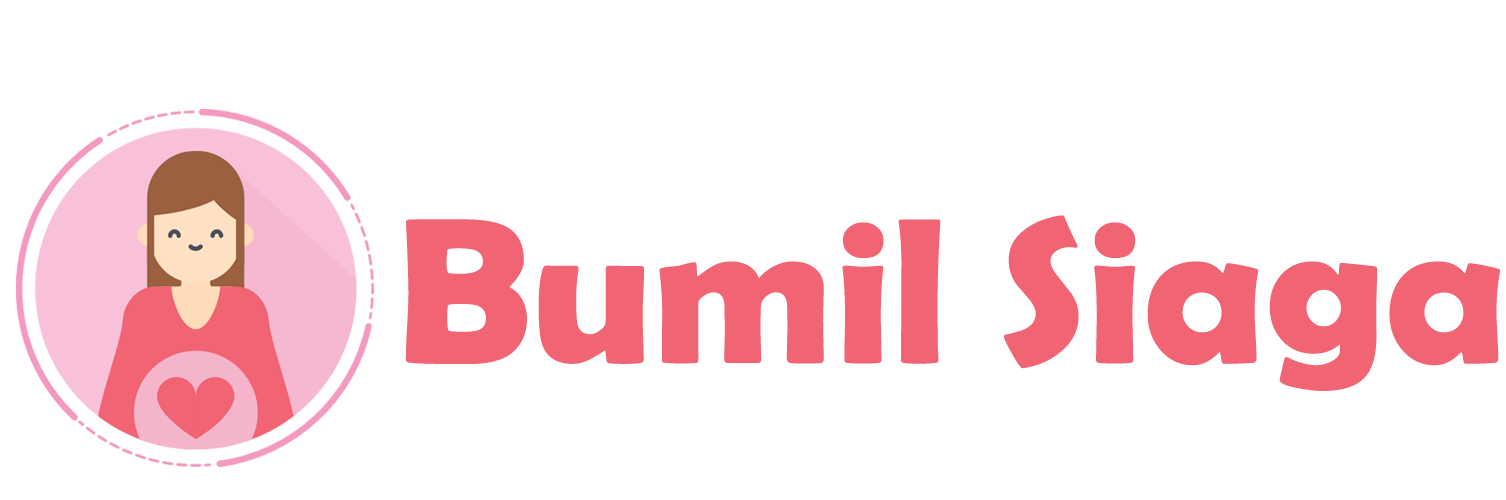
<style>
.page{position:relative;width:1506px;height:500px;background:#ffffff}
.page>*{position:absolute;margin:0}
.t1{font:208.7px "BerlinSansFBDemi-Bold";color:#f16474}
</style>
<div class="page">
<p class="t1" style="left:405px;top:215px;width:1095px;height:176px">Bumil Siaga</p>
</div>
